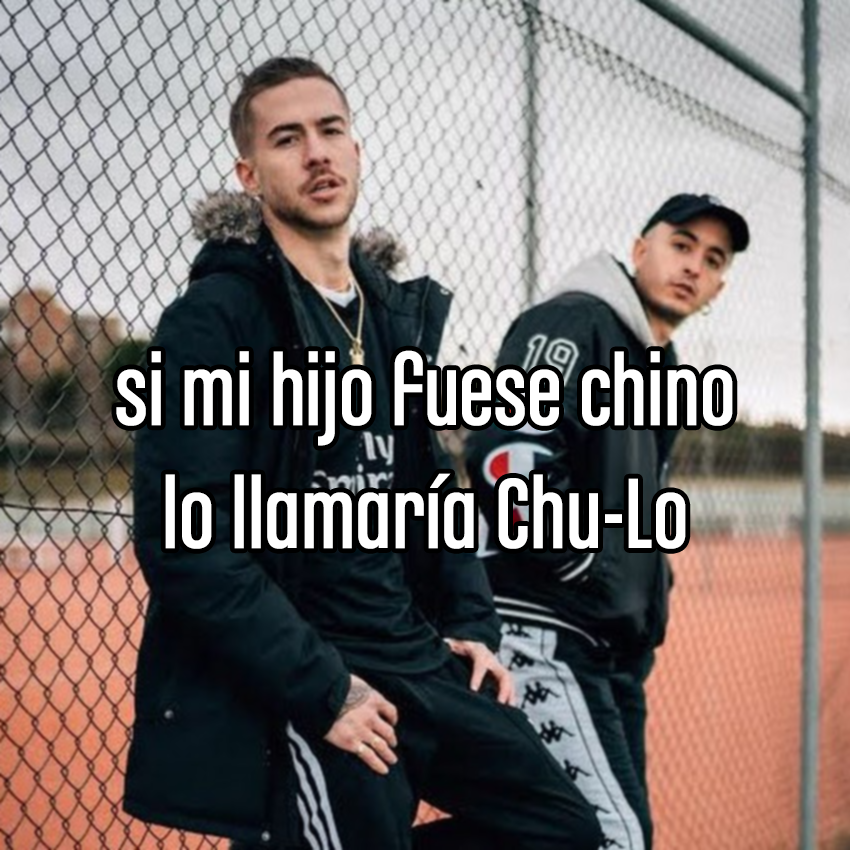
<style>
.page{position:relative;width:850px;height:850px}
.page>*{position:absolute;margin:0}
.t1{font:106.3px "ChaletComprime-CologneEighty";color:#ffffff}
</style>
<div class="page">
<p class="t1" style="left:116px;top:350px;width:617px;height:199px;text-align:center">si mi hijo fuese chino<br>lo llamaría Chu-Lo</p>
</div>
